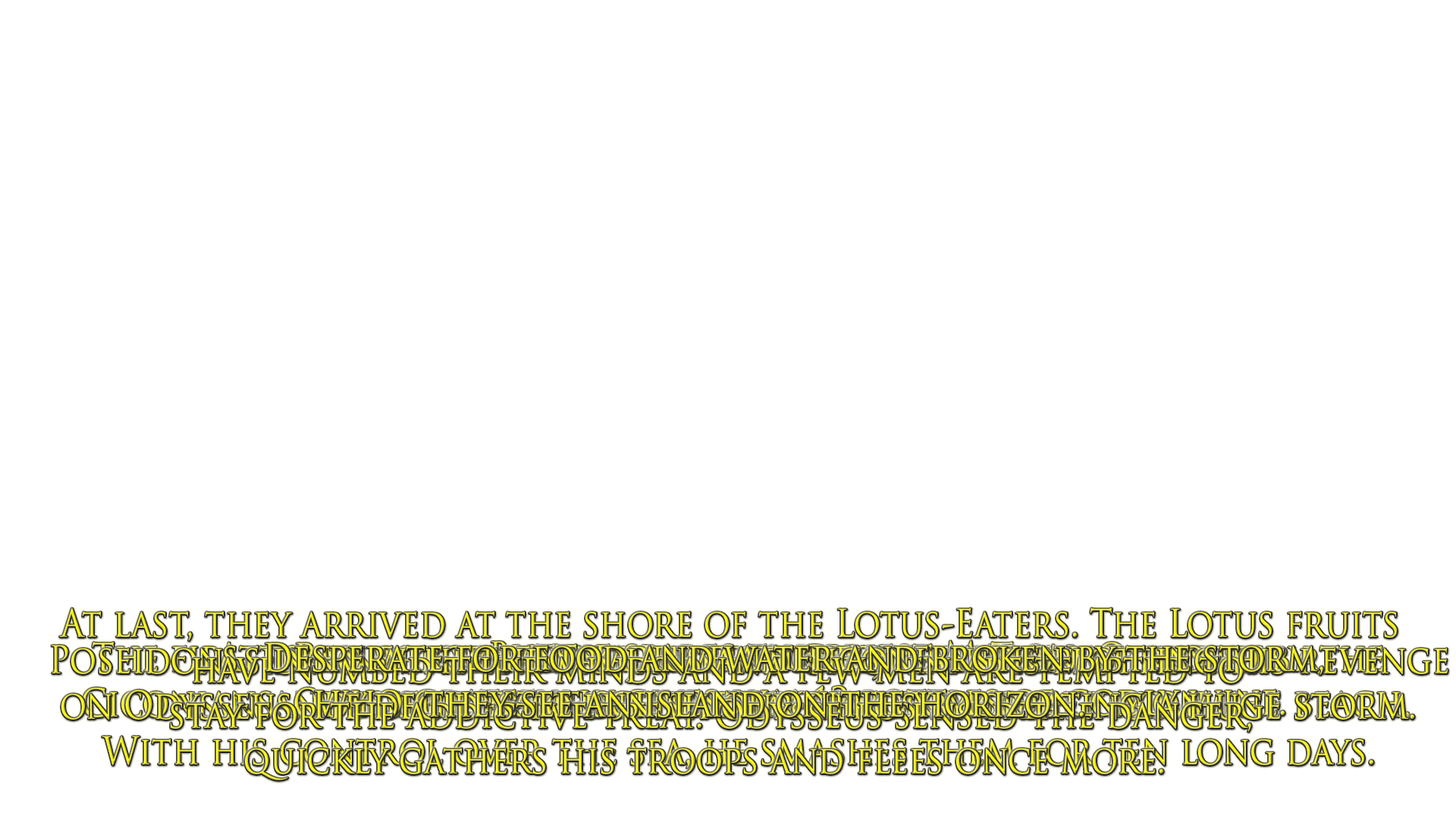
<style>
.page{position:relative;width:1456px;height:819px;background:#ffffff}
.page>*{position:absolute;margin:0}
.t1{font:37.9px "TrajanPro-Regular";scale:0.87 1}
</style>
<div class="page">
<p class="t1" style="left:59px;top:608px;width:1338px;height:172px">At last, they arrived at the shore of the Lotus-Eaters. The Lotus fruits<br>            have numbed their minds and a few men are tempted to <br>          stay for the addictive treat. Odysseus sensed the danger,<br>                 quickly gathers his troops and flees once more.</p>
<p class="t1" style="left:52px;top:645px;width:1396px;height:123px">Poseidon, siding with the Trojans and Ciconians, is plotting his revenge<br> on Odysseus. He decides to punish our heros by creating a huge storm.<br>     With his control over the sea, he smashes them for ten long days.</p>
</div>
